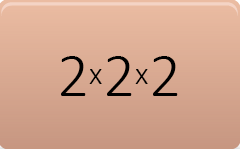
<style>
.page{position:relative;width:240px;height:149px}
.page>*{position:absolute;margin:0}
.t1{font:64px "Calibri-Light";color:#000000}
.t2{font:32px "Calibri-Light";color:#000000}
</style>
<div class="page">
<p class="t1" style="left:61px;top:56px;width:117px;height:40px">2<span class="t2">x</span>2<span class="t2">x</span>2</p>
</div>
